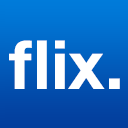
<style>
.page{position:relative;width:128px;height:128px}
.page>*{position:absolute;margin:0}
.t1{font:68px "HelveticaNeue-Bold";color:#ffffff}
</style>
<div class="page">
<p class="t1" style="left:9px;top:40px;width:111px;height:49px">flix.</p>
</div>
